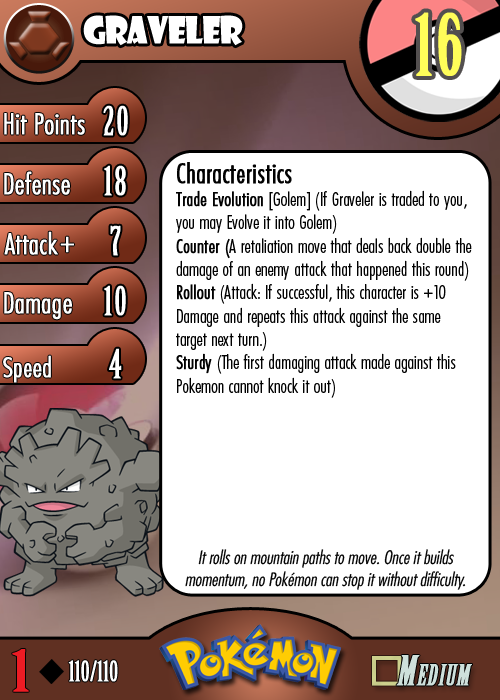
<style>
.page{position:relative;width:500px;height:700px;background:#ffffff}
.page>*{position:absolute;margin:0}
.t1{font:36.7px "ShowcardGothic-Reg";letter-spacing:-0.025em;color:#ffffff;scale:0.91 1}
.t2{font:83.3px "BirchStd";letter-spacing:0.025em;color:#fffd59;font-weight:bold}
.t3{font:27.8px "Futura-CondensedLight";color:#ffffff;font-weight:bold}
.t4{font:38.9px "BirchStd";letter-spacing:0.035em;color:#ffffff;font-weight:bold}
.t5{font:19.4px "FuturaCondensedBQ-Light";color:#010101}
.t6{font:27.8px "FuturaCondensedBQ-Light";color:#010101;font-weight:bold}
.t7{font:19.4px "FuturaCondensedBQ-Light";color:#010101;font-weight:bold}
.t8{font:30.6px "Futura-CondensedLight";color:#ffffff;font-weight:bold}
.t9{font:27.8px "FuturaCondensedBQ-Light";color:#ffffff;font-weight:bold}
.t10{font:18.1px "Futura-CondensedLight";color:#010101;font-style:italic}
.t11{font:55.6px "BirchStd";color:#ed1c24;font-weight:bold;scale:1.5 1}
.t12{font:27.8px "BirchStd";color:#ffffff;font-weight:bold}
</style>
<div class="page">
<p class="t1" style="left:83px;top:15px;width:160px;height:31px">graveler</p>
<p class="t2" style="left:415px;top:12px;width:47px;height:64px">16</p>
<p class="t3" style="left:4px;top:113px;width:81px;height:22px">Hit Points</p>
<p class="t4" style="left:103px;top:105px;width:25px;height:31px">20</p>
<p class="t3" style="left:4px;top:171px;width:66px;height:24px">Defense</p>
<p class="t4" style="left:104px;top:165px;width:22px;height:31px">18</p>
<p class="t5" style="left:176px;top:162px;width:296px;height:236px"><span class="t6">Characteristics<br></span><span class="t7">Trade Evolution </span>[Golem] (If Graveler is traded to you, you may Evolve it into Golem)<br><span class="t7">Counter (</span>A retaliation move that deals back double the damage of an enemy attack that happened this round)<br><span class="t7">Rollout</span> (Attack: If successful, this character is +10 Damage and repeats this attack against the same target next turn.)<br><span class="t7">Sturdy</span> (The first damaging attack made against this Pokemon cannot knock it out)</p>
<p class="t3" style="left:4px;top:231px;width:54px;height:24px">Attack</p>
<p class="t4" style="left:110px;top:225px;width:11px;height:31px">7</p>
<p class="t8" style="left:60px;top:236px;width:14px;height:17px">+</p>
<p class="t3" style="left:4px;top:292px;width:68px;height:28px">Damage</p>
<p class="t4" style="left:104px;top:285px;width:22px;height:31px">10</p>
<p class="t4" style="left:109px;top:348px;width:13px;height:31px">4</p>
<p class="t9" style="left:3px;top:355px;width:48px;height:28px">Speed</p>
<p class="t10" style="left:185px;top:549px;width:281px;height:41px;text-align:center">It rolls on mountain paths to move. Once it builds momentum, no Pokémon can stop it without difficulty.</p>
<p class="t11" style="left:12px;top:649px;width:17px;height:43px">1</p>
<p class="t12" style="left:68px;top:660px;width:50px;height:22px">110/110</p>
</div>
